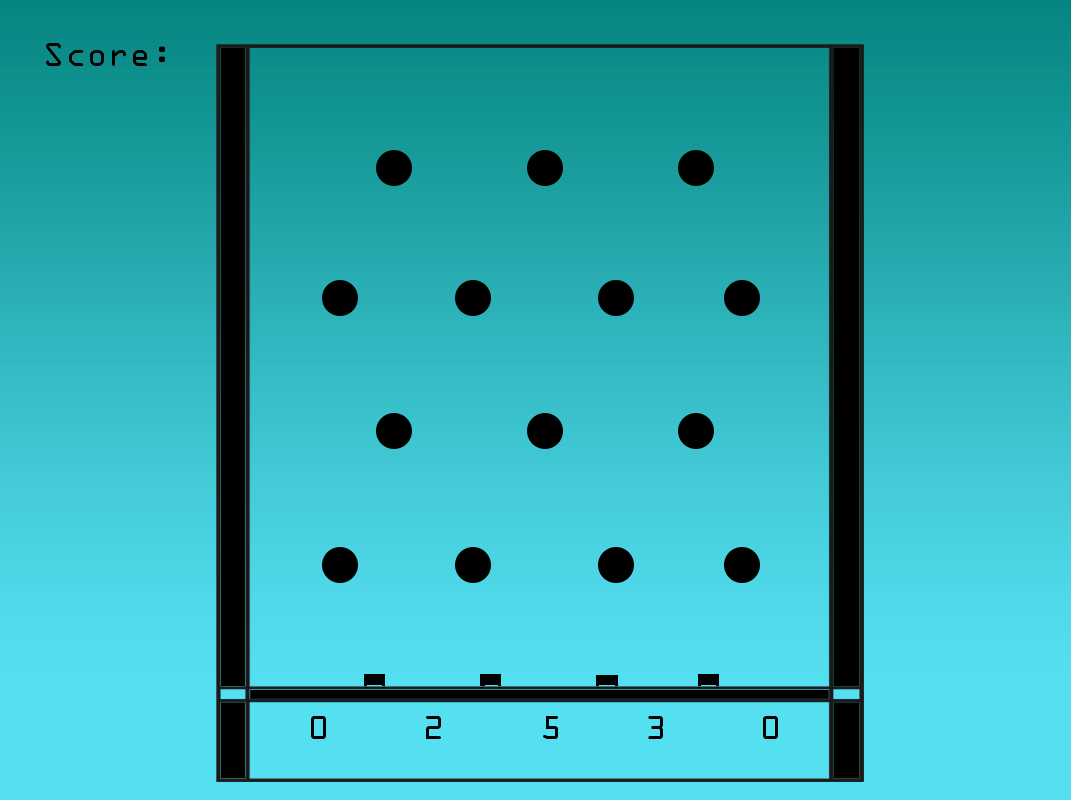
<style>
.page{position:relative;width:1071px;height:800px}
.page>*{position:absolute;margin:0}
.t1{font:30px "OCRAStd";color:#000000}
</style>
<div class="page">
<p class="t1" style="left:46px;top:43px;width:119px;height:23px">Score:</p>
<p class="t1" style="left:311px;top:716px;width:15px;height:23px">0</p>
<p class="t1" style="left:426px;top:716px;width:15px;height:23px">2</p>
<p class="t1" style="left:648px;top:716px;width:15px;height:23px">3</p>
<p class="t1" style="left:763px;top:716px;width:15px;height:23px">0</p>
</div>
